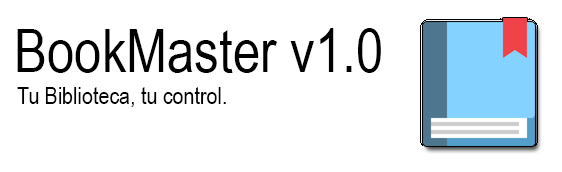
<style>
.page{position:relative;width:562px;height:172px;background:#ffffff}
.page>*{position:absolute;margin:0}
.t1{font:60px "ArialNarrow";color:#000000}
.t2{font:24px "ArialNarrow";color:#000000}
</style>
<div class="page">
<p class="t1" style="left:17px;top:28px;width:364px;height:45px">BookMaster v1.0</p>
<p class="t2" style="left:17px;top:87px;width:209px;height:20px">Tu Biblioteca, tu control.</p>
</div>
